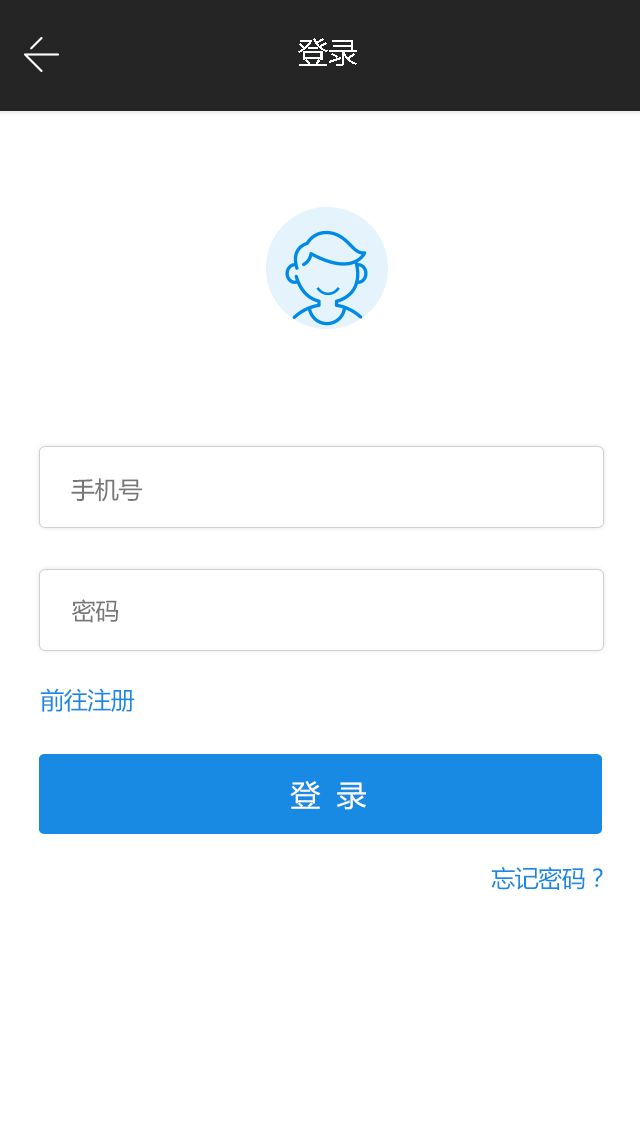
<style>
.page{position:relative;width:640px;height:1136px;background:#ffffff}
.page>*{position:absolute;margin:0}
.t1{font:30px "MicrosoftYaHei";color:#fdfeff}
.t2{font:24px "MicrosoftYaHei";letter-spacing:-0.02em;color:#777777}
.t3{font:24px "MicrosoftYaHei";letter-spacing:-0.02em;color:#188ae4}
.t4{font:30px "MicrosoftYaHei";letter-spacing:-0.02em;color:#ffffff}
</style>
<div class="page">
<p class="t1" style="left:298px;top:38px;width:59px;height:28px">登录</p>
<p class="t2" style="left:71px;top:478px;width:71px;height:24px">手机号</p>
<p class="t2" style="left:72px;top:599px;width:46px;height:24px">密码</p>
<p class="t3" style="left:40px;top:688px;width:95px;height:24px">前往注册</p>
<p class="t4" style="left:290px;top:781px;width:76px;height:29px">登  录</p>
<p class="t3" style="left:491px;top:866px;width:112px;height:24px">忘记密码？</p>
</div>
